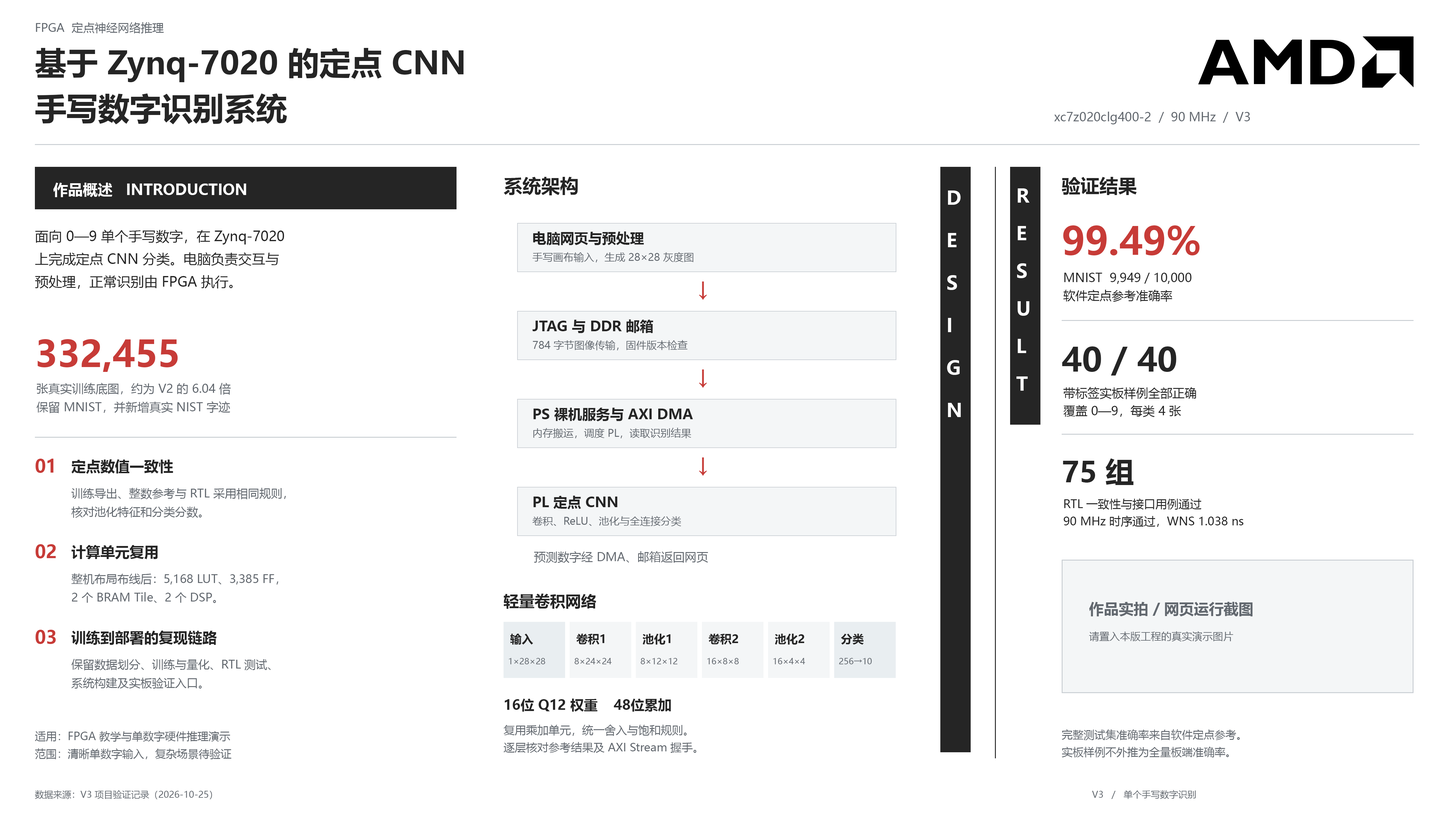
<style>
.page{position:relative;width:1456px;height:819px;background:#ffffff}
.page>*{position:absolute;margin:0}
.t1{font:11.5px "MicrosoftYaHei";color:#62686f}
.t2{font:31.5px "MicrosoftYaHei-Bold";color:#252525}
.t3{font:12.1px "MicrosoftYaHei";color:#62686f}
.t4{font:14.9px "MicrosoftYaHei-Bold";color:#ffffff}
.t5{font:18.8px "MicrosoftYaHei-Bold";color:#252525}
.t6{font:18.8px/42.5px "MicrosoftYaHei-Bold";color:#ffffff}
.t7{font:18.8px/37.6px "MicrosoftYaHei-Bold";color:#ffffff}
.t8{font:13.6px/22.7px "MicrosoftYaHei";color:#252525}
.t9{font:14px "MicrosoftYaHei-Bold";color:#252525}
.t10{font:37.9px "MicrosoftYaHei-Bold";color:#c73b37}
.t11{font:10.3px "MicrosoftYaHei";color:#62686f}
.t12{font:21.2px "MicrosoftYaHei-Bold";color:#c73b37}
.t13{font:12.1px/17.9px "MicrosoftYaHei";color:#252525}
.t14{font:36.4px "MicrosoftYaHei-Bold";color:#c73b37}
.t15{font:32.8px "MicrosoftYaHei-Bold";color:#252525}
.t16{font:11.8px/18.5px "MicrosoftYaHei";color:#62686f}
.t17{font:17.9px "MicrosoftYaHei-Bold";color:#c73b37}
.t18{font:14.6px "MicrosoftYaHei-Bold";color:#252525}
.t19{font:28.5px "MicrosoftYaHei-Bold";color:#252525}
.t20{font:11.5px/18.5px "MicrosoftYaHei";color:#62686f}
.t21{font:11.5px/17.3px "MicrosoftYaHei";color:#252525}
.t22{font:11.8px "MicrosoftYaHei";color:#62686f}
.t23{font:15.5px "MicrosoftYaHei-Bold";color:#252525}
.t24{font:14.9px "MicrosoftYaHei-Bold";color:#62686f}
.t25{font:11.5px "MicrosoftYaHei-Bold";color:#252525}
.t26{font:8.5px "MicrosoftYaHei";color:#62686f}
.t27{font:13.6px "MicrosoftYaHei-Bold";color:#252525}
.t28{font:11.2px/17.3px "MicrosoftYaHei";color:#62686f}
.t29{font:10.9px/17.6px "MicrosoftYaHei";color:#62686f}
.t30{font:10.9px/17.3px "MicrosoftYaHei";color:#62686f}
.t31{font:9.1px "MicrosoftYaHei";color:#62686f}
</style>
<div class="page">
<p class="t1" style="left:36px;top:22px;width:128px;height:11px">FPGA  定点神经网络推理</p>
<p class="t2" style="left:35px;top:48px;width:428px;height:34px">基于 Zynq-7020 的定点 CNN</p>
<p class="t2" style="left:35px;top:93px;width:252px;height:31px">手写数字识别系统</p>
<p class="t3" style="left:1054px;top:112px;width:196px;height:12px">xc7z020clg400-2  /  90 MHz  /  V3</p>
<p class="t4" style="left:53px;top:183px;width:193px;height:14px">作品概述   INTRODUCTION</p>
<p class="t5" style="left:504px;top:177px;width:74px;height:18px">系统架构</p>
<p class="t5" style="left:1062px;top:177px;width:75px;height:18px">验证结果</p>
<p class="t6" style="left:947px;top:190px;width:14px;height:227px">D<br>E<br>S<br>I<br>G<br>N</p>
<p class="t7" style="left:1016px;top:188px;width:13px;height:203px">R<br>E<br>S<br>U<br>L<br>T</p>
<p class="t8" style="left:35px;top:230px;width:249px;height:59px">面向 0—9 单个手写数字，在 Zynq-7020<br>上完成定点 CNN 分类。电脑负责交互与<br>预处理，正常识别由 FPGA 执行。</p>
<p class="t9" style="left:533px;top:231px;width:111px;height:14px">电脑网页与预处理</p>
<p class="t10" style="left:1063px;top:225px;width:137px;height:30px">99.49%</p>
<p class="t11" style="left:532px;top:252px;width:161px;height:10px">手写画布输入，生成 28×28 灰度图</p>
<p class="t12" style="left:699px;top:281px;width:8px;height:19px">↓</p>
<p class="t13" style="left:1063px;top:273px;width:128px;height:29px">MNIST  9,949 / 10,000<br>软件定点参考准确率</p>
<p class="t9" style="left:532px;top:319px;width:121px;height:14px">JTAG 与 DDR 邮箱</p>
<p class="t14" style="left:38px;top:339px;width:140px;height:33px">332,455</p>
<p class="t11" style="left:533px;top:340px;width:155px;height:10px">784 字节图像传输，固件版本检查</p>
<p class="t15" style="left:1062px;top:346px;width:114px;height:30px">40 / 40</p>
<p class="t12" style="left:699px;top:369px;width:8px;height:19px">↓</p>
<p class="t16" style="left:36px;top:383px;width:195px;height:30px">张真实训练底图，约为 V2 的 6.04 倍<br>保留 MNIST，并新增真实 NIST 字迹</p>
<p class="t13" style="left:1063px;top:387px;width:133px;height:30px">带标签实板样例全部正确<br>覆盖 0—9，每类 4 张</p>
<p class="t9" style="left:534px;top:407px;width:159px;height:14px">PS 裸机服务与 AXI DMA</p>
<p class="t11" style="left:533px;top:428px;width:158px;height:10px">内存搬运，调度 PL，读取识别结果</p>
<p class="t17" style="left:35px;top:459px;width:18px;height:14px">01</p>
<p class="t18" style="left:71px;top:459px;width:102px;height:15px">定点数值一致性</p>
<p class="t12" style="left:699px;top:457px;width:8px;height:19px">↓</p>
<p class="t19" style="left:1063px;top:458px;width:71px;height:27px">75 组</p>
<p class="t20" style="left:71px;top:488px;width:215px;height:30px">训练导出、整数参考与 RTL 采用相同规则，<br>核对池化特征和分类分数。</p>
<p class="t9" style="left:534px;top:496px;width:83px;height:13px">PL 定点 CNN</p>
<p class="t21" style="left:1063px;top:498px;width:180px;height:29px">RTL 一致性与接口用例通过<br>90 MHz 时序通过，WNS 1.038 ns</p>
<p class="t11" style="left:532px;top:516px;width:149px;height:10px">卷积、ReLU、池化与全连接分类</p>
<p class="t17" style="left:35px;top:544px;width:21px;height:14px">02</p>
<p class="t18" style="left:71px;top:545px;width:87px;height:14px">计算单元复用</p>
<p class="t22" style="left:534px;top:551px;width:174px;height:12px">预测数字经 DMA、邮箱返回网页</p>
<p class="t20" style="left:71px;top:573px;width:207px;height:30px">整机布局布线后：5,168 LUT、3,385 FF，<br>2 个 BRAM Tile、2 个 DSP。</p>
<p class="t23" style="left:504px;top:594px;width:92px;height:15px">轻量卷积网络</p>
<p class="t24" style="left:1089px;top:602px;width:164px;height:14px">作品实拍 / 网页运行截图</p>
<p class="t17" style="left:35px;top:630px;width:21px;height:14px">03</p>
<p class="t18" style="left:71px;top:631px;width:146px;height:14px">训练到部署的复现链路</p>
<p class="t25" style="left:510px;top:634px;width:23px;height:11px">输入</p>
<p class="t25" style="left:576px;top:634px;width:29px;height:11px">卷积1</p>
<p class="t25" style="left:642px;top:634px;width:29px;height:11px">池化1</p>
<p class="t25" style="left:709px;top:634px;width:29px;height:11px">卷积2</p>
<p class="t25" style="left:775px;top:634px;width:29px;height:11px">池化2</p>
<p class="t25" style="left:841px;top:634px;width:23px;height:11px">分类</p>
<p class="t11" style="left:1089px;top:631px;width:144px;height:11px">请置入本版工程的真实演示图片</p>
<p class="t20" style="left:71px;top:659px;width:200px;height:30px">保留数据划分、训练与量化、RTL 测试、<br>系统构建及实板验证入口。</p>
<p class="t26" style="left:509px;top:658px;width:36px;height:6px">1×28×28</p>
<p class="t26" style="left:575px;top:658px;width:37px;height:6px">8×24×24</p>
<p class="t26" style="left:641px;top:658px;width:36px;height:6px">8×12×12</p>
<p class="t26" style="left:707px;top:658px;width:32px;height:6px">16×8×8</p>
<p class="t26" style="left:773px;top:658px;width:32px;height:6px">16×4×4</p>
<p class="t26" style="left:839px;top:658px;width:33px;height:6px">256→10</p>
<p class="t27" style="left:505px;top:698px;width:166px;height:14px">16位 Q12 权重    48位累加</p>
<p class="t28" style="left:504px;top:725px;width:192px;height:28px">复用乘加单元，统一舍入与饱和规则。<br>逐层核对参考结果及 AXI Stream 握手。</p>
<p class="t29" style="left:35px;top:731px;width:196px;height:28px">适用：FPGA 教学与单数字硬件推理演示<br>范围：清晰单数字输入，复杂场景待验证</p>
<p class="t30" style="left:1062px;top:729px;width:178px;height:28px">完整测试集准确率来自软件定点参考。<br>实板样例不外推为全量板端准确率。</p>
<p class="t31" style="left:35px;top:790px;width:177px;height:9px">数据来源：V3 项目验证记录（2026-10-25）</p>
<p class="t31" style="left:1092px;top:790px;width:104px;height:9px">V3   /   单个手写数字识别</p>
</div>
